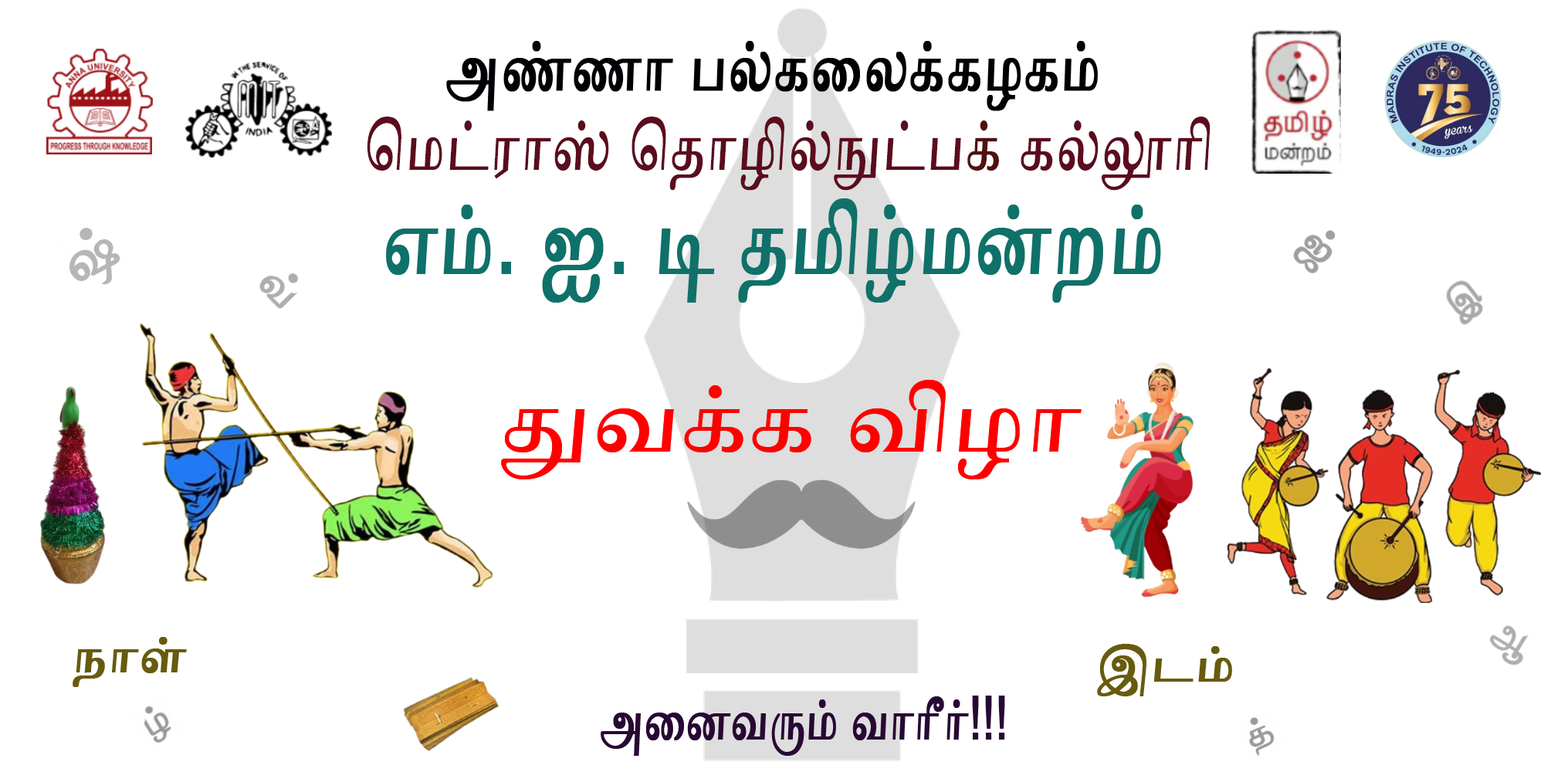
<style>
.page{position:relative;width:1544px;height:772px;background:#ffffff}
.page>*{position:absolute;margin:0}
.t1{font:75.1px "ArialUnicodeMS";color:#000104;font-weight:bold;scale:0.71 1}
.t2{font:75.1px "ArialUnicodeMS";color:#5b0c1d;font-weight:bold;scale:0.71 1}
.t3{font:75.1px "ArialUnicodeMS";color:#511010;font-weight:bold;scale:0.71 1}
.t4{font:105.1px "ArialUnicodeMS";color:#0f7169;font-weight:bold;scale:0.71 1}
.t5{font:102px "ArialUnicodeMS";color:#fe0000}
.t6{font:53.6px "ArialUnicodeMS";color:#675b0e;font-weight:bold}
.t7{font:60.1px "ArialUnicodeMS";color:#280834;font-weight:bold;scale:0.71 1}
</style>
<div class="page">
<p class="t1" style="left:446px;top:41px;width:652px;height:70px">அண்ணா பல்கலைக்கழகம்</p>
<p class="t2" style="left:367px;top:117px;width:844px;height:74px">மெட்ராஸ் தொழில்நுட்ப<span class="t3">க்</span> கல்லூரி</p>
<p class="t4" style="left:386px;top:198px;width:775px;height:105px">எம். ஐ. டி தமிழ்மன்றம்</p>
<p class="t5" style="left:501px;top:380px;width:581px;height:100px">துவக்க விழா</p>
<p class="t6" style="left:73px;top:637px;width:114px;height:50px">நாள்</p>
<p class="t6" style="left:1097px;top:644px;width:135px;height:52px">இடம்</p>
<p class="t7" style="left:601px;top:696px;width:404px;height:60px">அனைவரும் வாரீர்!!!</p>
</div>
